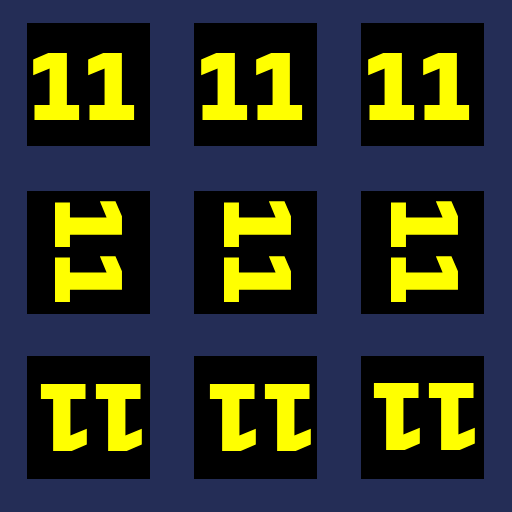
<style>
.page{position:relative;width:512px;height:512px;background:#242d56}
.page>*{position:absolute;margin:0}
.t1{font:130px "Share-BoldOSF";color:#ffff00}
</style>
<div class="page">
<p class="t1" style="left:33px;top:53px;width:102px;height:67px">11</p>
<p class="t1" style="left:201px;top:53px;width:102px;height:67px">11</p>
<p class="t1" style="left:368px;top:53px;width:102px;height:67px">11</p>
<p class="t1" style="left:55px;top:201px;width:67px;height:102px;rotate:90deg">11</p>
<p class="t1" style="left:224px;top:201px;width:67px;height:102px;rotate:90deg">11</p>
<p class="t1" style="left:391px;top:201px;width:67px;height:102px;rotate:90deg">11</p>
<p class="t1" style="left:40px;top:383px;width:102px;height:68px;rotate:-180deg">11</p>
<p class="t1" style="left:209px;top:383px;width:102px;height:68px;rotate:-180deg">11</p>
<p class="t1" style="left:373px;top:382px;width:102px;height:68px;rotate:-180deg">11</p>
</div>
